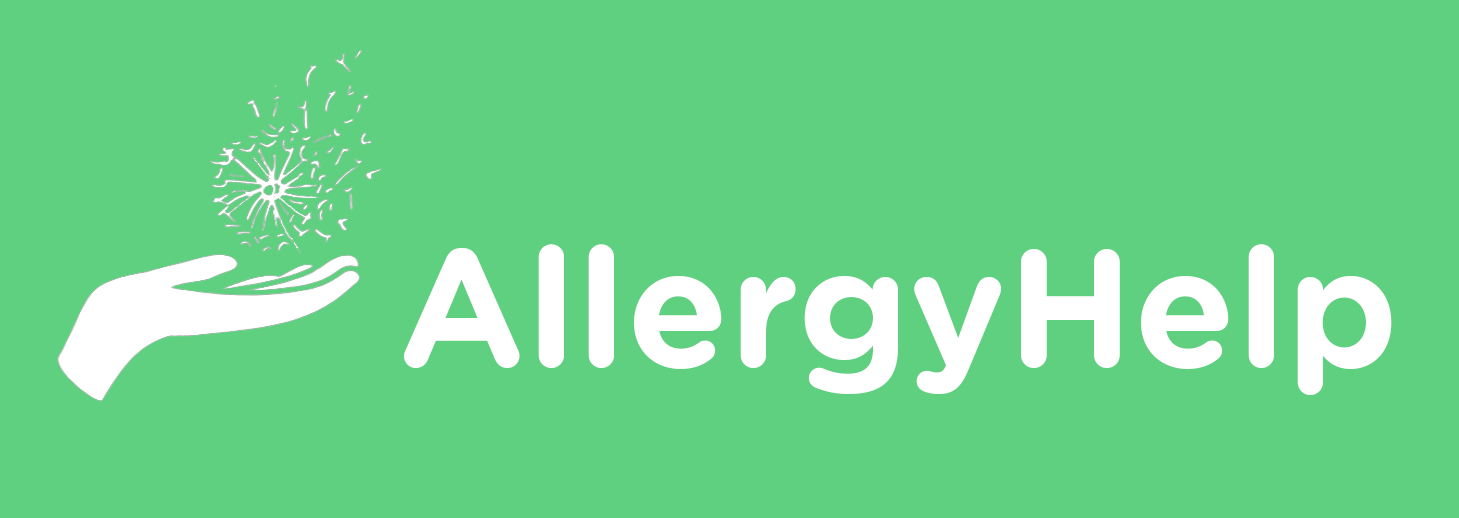
<style>
.page{position:relative;width:1459px;height:518px;background:#5fcf80}
.page>*{position:absolute;margin:0}
.t1{font:166.7px "GothamRounded-Bold";color:#ffffff}
</style>
<div class="page">
<p class="t1" style="left:404px;top:244px;width:988px;height:151px">AllergyHelp</p>
</div>
